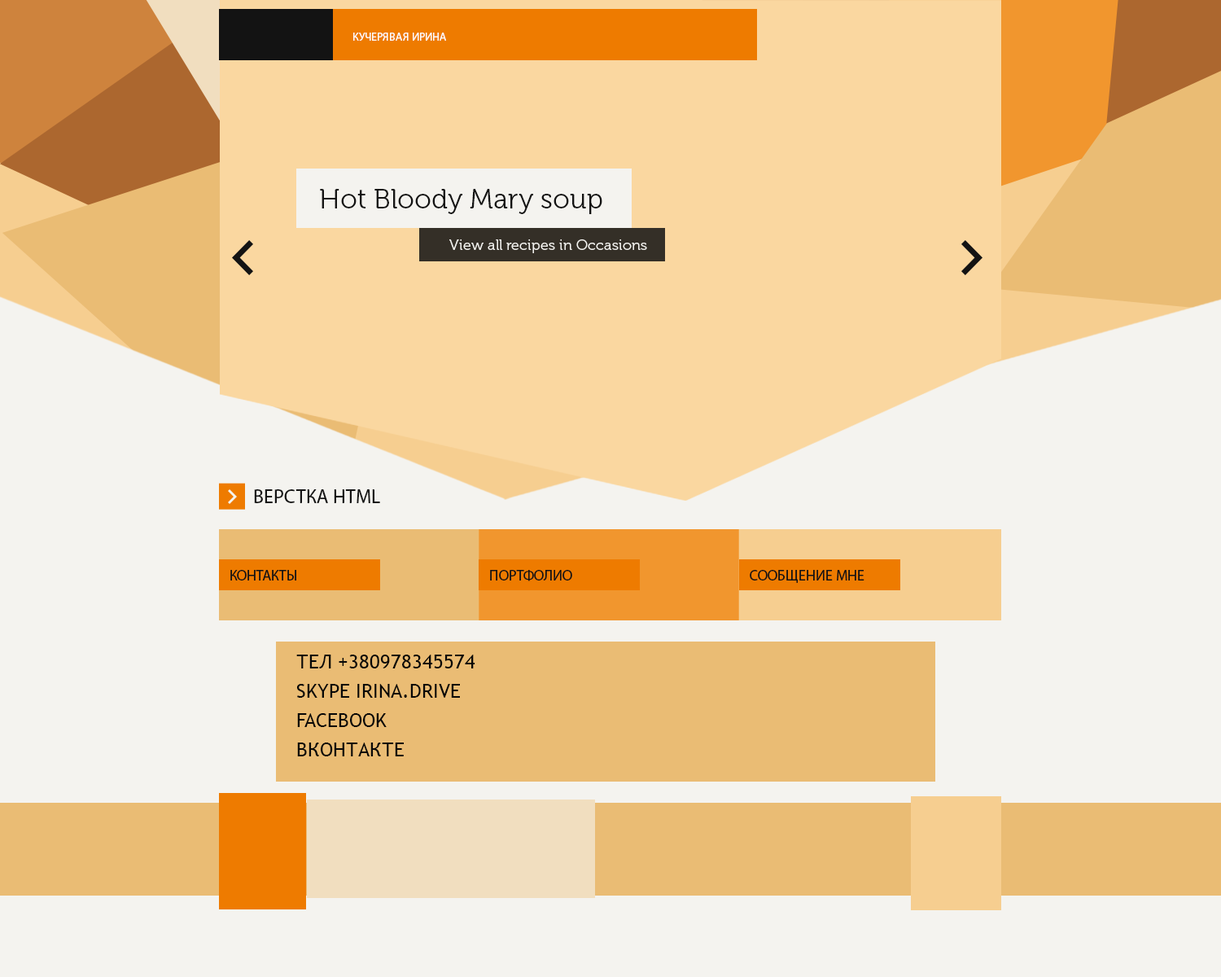
<style>
.page{position:relative;width:1221px;height:977px;background:#f4f3ef}
.page>*{position:absolute;margin:0}
.t1{font:11.4px "MyriadPro-Regular";color:#fdfdfd;text-transform:uppercase}
.t2{font:27.7px "Museo-300";color:#131313}
.t3{font:14.7px "Museo-300";color:#f4f3ef}
.t4{font:19.5px "MyriadPro-Regular";color:#131313}
.t5{font:14.7px "MyriadPro-Regular";color:#131313}
.t6{font:19.5px/29.3px "TrebuchetMS";color:#070707;text-transform:uppercase}
</style>
<div class="page">
<p class="t1" style="left:353px;top:33px;width:93px;height:8px">кУЧЕРЯВАЯ ИРИНА</p>
<p class="t2" style="left:320px;top:189px;width:282px;height:25px">Hot Bloody Mary soup</p>
<p class="t3" style="left:449px;top:239px;width:198px;height:14px">View all recipes in Occasions</p>
<p class="t4" style="left:254px;top:489px;width:126px;height:14px">ВЕРСТКА HTML</p>
<p class="t5" style="left:230px;top:570px;width:66px;height:10px">КОНТАКТЫ</p>
<p class="t5" style="left:490px;top:570px;width:82px;height:11px">ПОРТФОЛИО</p>
<p class="t5" style="left:750px;top:570px;width:114px;height:13px">СООБЩЕНИЕ МНЕ</p>
<p class="t6" style="left:296px;top:654px;width:179px;height:102px">ТЕЛ +380978345574<br>SKYPE IRINA.DRIVE<br>FACEBOOK<br>ВКОНТАКТЕ</p>
</div>
